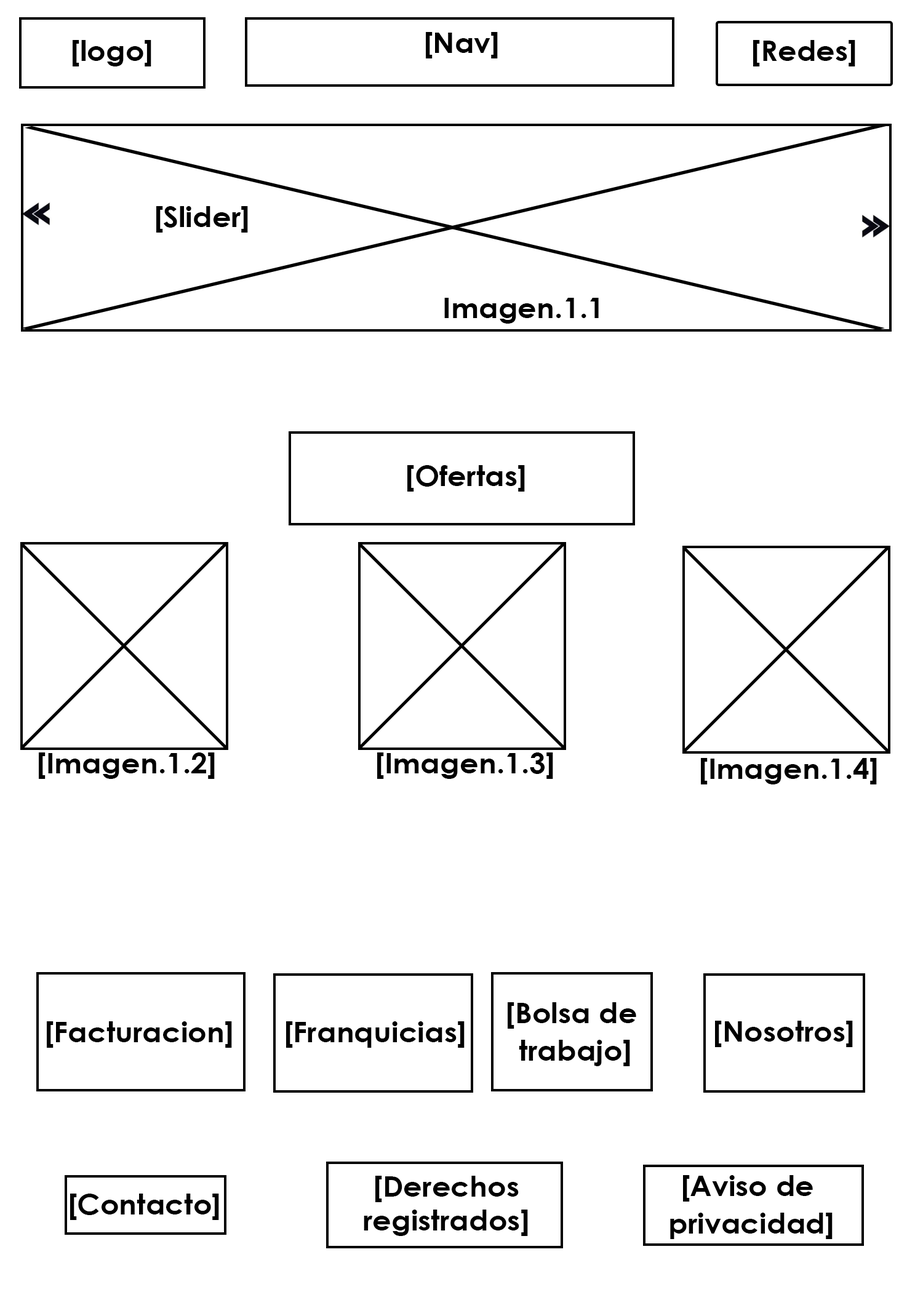
<style>
.page{position:relative;width:923px;height:1292px;background:#ffffff}
.page>*{position:absolute;margin:0}
.t1{font:28.2px "CenturyGothic-Bold";color:#000000;scale:1.05 1}
</style>
<div class="page">
<p class="t1" style="left:73px;top:40px;width:78px;height:26px">[logo]</p>
<p class="t1" style="left:426px;top:32px;width:72px;height:26px">[Nav]</p>
<p class="t1" style="left:753px;top:40px;width:102px;height:26px">[Redes]</p>
<p class="t1" style="left:156px;top:206px;width:92px;height:27px">[Slider]</p>
<p class="t1" style="left:444px;top:298px;width:155px;height:26px">Imagen.1.1</p>
<p class="t1" style="left:407px;top:465px;width:118px;height:27px">[Ofertas]</p>
<p class="t1" style="left:39px;top:752px;width:176px;height:27px">[Imagen.1.2]</p>
<p class="t1" style="left:377px;top:752px;width:176px;height:27px">[Imagen.1.3]</p>
<p class="t1" style="left:701px;top:758px;width:176px;height:26px">[Imagen.1.4]</p>
<p class="t1" style="left:508px;top:1002px;width:128px;height:64px;text-align:center">[Bolsa de <br>trabajo]</p>
<p class="t1" style="left:47px;top:1021px;width:185px;height:27px">[Facturacion]</p>
<p class="t1" style="left:286px;top:1021px;width:179px;height:27px">[Franquicias]</p>
<p class="t1" style="left:715px;top:1021px;width:138px;height:26px">[Nosotros]</p>
<p class="t1" style="left:364px;top:1176px;width:164px;height:60px;text-align:center">[Derechos registrados]</p>
<p class="t1" style="left:670px;top:1175px;width:162px;height:64px;text-align:center">[Aviso de <br>privacidad]</p>
<p class="t1" style="left:70px;top:1194px;width:149px;height:26px">[Contacto]</p>
</div>
